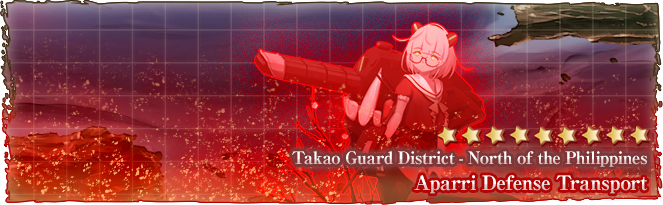
<style>
.page{position:relative;width:663px;height:205px}
.page>*{position:absolute;margin:0}
.t1{font:17px "RyuminPro-ExBold";letter-spacing:-0.04em}
.t2{font:20px "RyuminPro-ExBold";letter-spacing:-0.04em}
</style>
<div class="page">
<p class="t1" style="left:292px;top:151px;width:355px;height:16px">Takao Guard District - North of the Philippines</p>
<p class="t2" style="left:414px;top:175px;width:233px;height:19px">Aparri Defense Transport</p>
</div>
